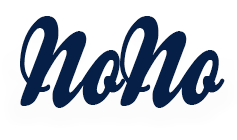
<style>
.page{position:relative;width:237px;height:140px;background:#ffffff}
.page>*{position:absolute;margin:0}
.t1{font:127.7px "BallparkWeiner";color:#051f46;scale:0.77 1}
</style>
<div class="page">
<p class="t1" style="left:20px;top:16px;width:205px;height:92px">NoNo</p>
</div>
